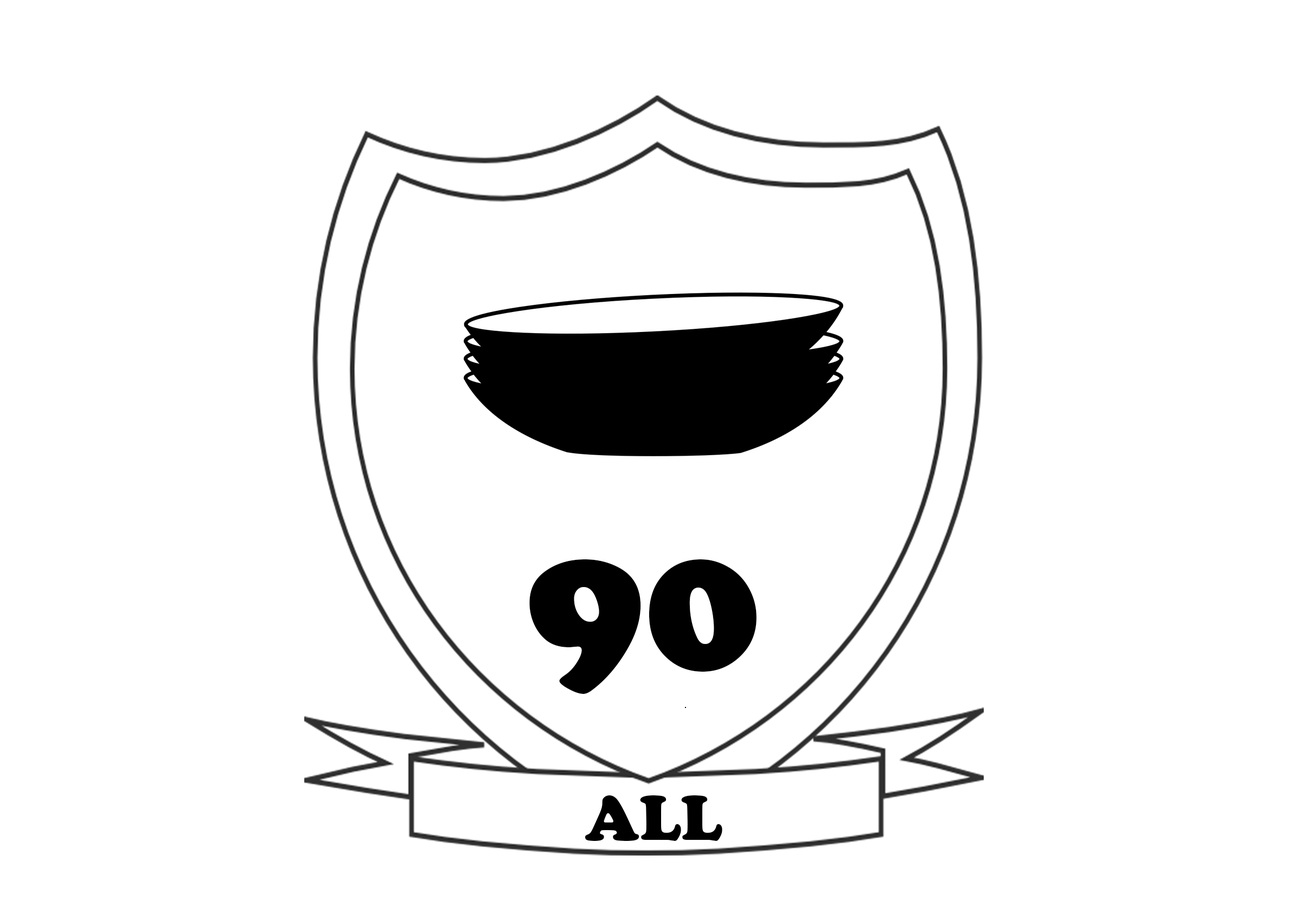
<style>
.page{position:relative;width:1307px;height:912px;background:#ffffff}
.page>*{position:absolute;margin:0}
.t1{font:195.3px "CooperBlack";color:#000000}
.t2{font:65.1px "CooperBlack";color:#000000}
</style>
<div class="page">
<p class="t1" style="left:530px;top:559px;width:227px;height:135px">90</p>
<p class="t2" style="left:585px;top:795px;width:138px;height:46px">ALL</p>
</div>
